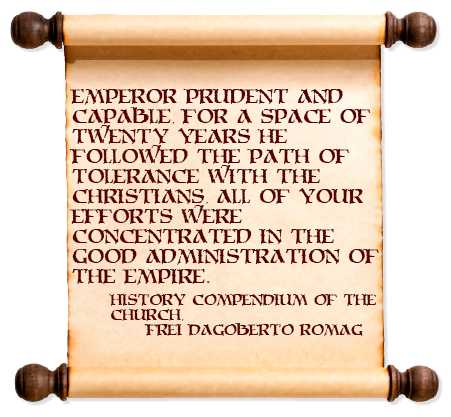
<style>
.page{position:relative;width:451px;height:417px;background:#ffffff}
.page>*{position:absolute;margin:0}
.t1{font:16.7px "MoriaCitadel";color:#580000}
.t2{font:12.5px "MoriaCitadel";color:#580000}
</style>
<div class="page">
<p class="t1" style="left:69px;top:89px;width:310px;height:196px">Emperor prudent and<br>capable, for a space of<br>twenty years he<br>followed the path of<br>tolerance with the<br>christians, all of your<br>efforts were<br>concentrated in the<br>good administration of<br>the empire.</p>
<p class="t2" style="left:109px;top:293px;width:267px;height:43px">History Compendium of the<br>Church,<br> Frei Dagoberto Romag</p>
</div>
